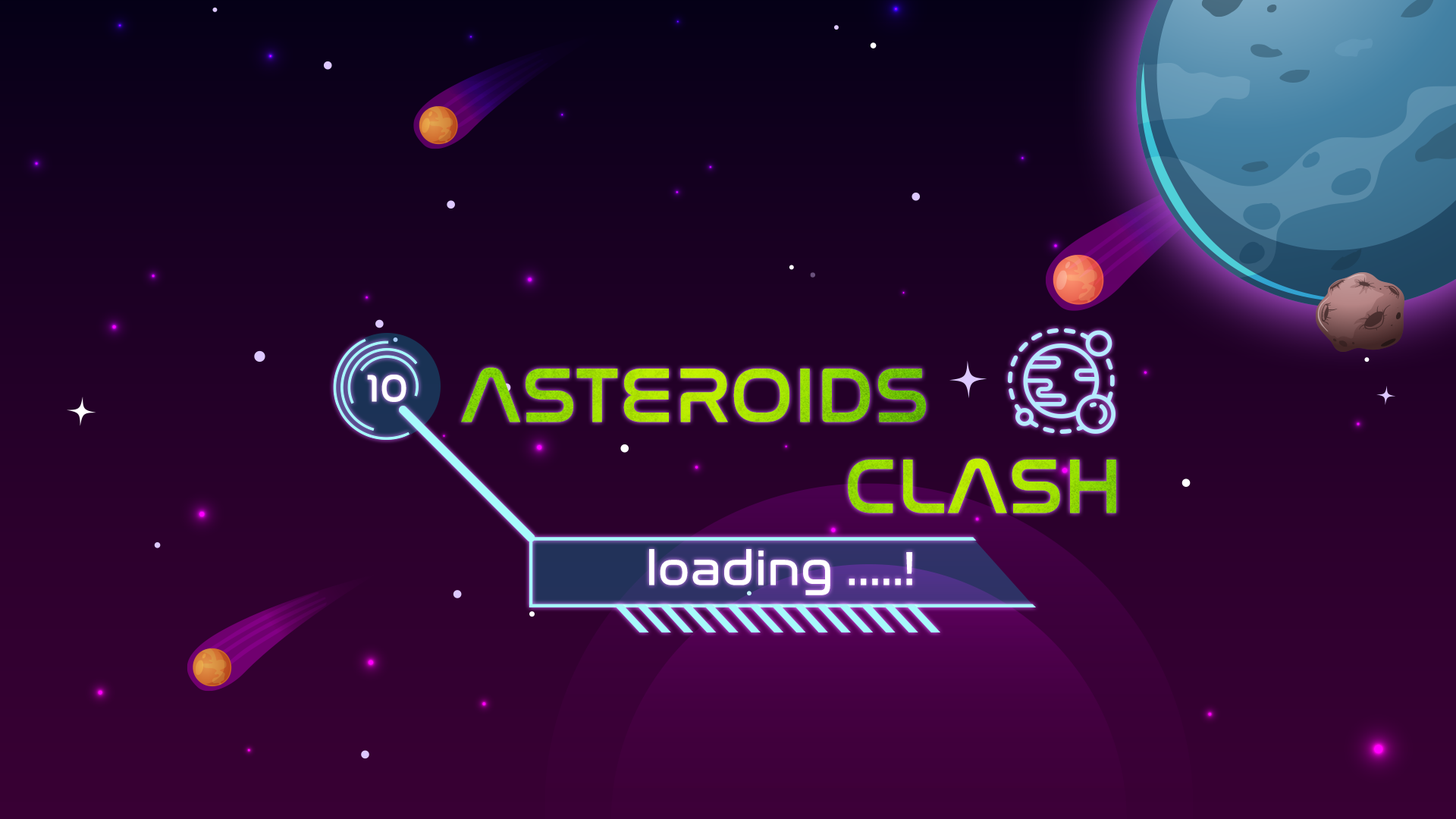
<style>
.page{position:relative;width:1456px;height:819px}
.page>*{position:absolute;margin:0}
.t1{font:39.5px "NasalizationRg-Regular";color:#ffffff}
.t2{font:79px "NasalizationRg-Regular";text-transform:uppercase}
.t3{font:47.6px "NasalizationRg-Regular";color:#ffffff}
</style>
<div class="page">
<p class="t1" style="left:367px;top:375px;width:39px;height:27px">10</p>
<p class="t2" style="left:461px;top:367px;width:465px;height:55px">Asteroids</p>
<p class="t2" style="left:848px;top:458px;width:268px;height:55px">Clash</p>
<p class="t3" style="left:649px;top:549px;width:263px;height:46px">loading .....!</p>
</div>
